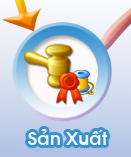
<style>
.page{position:relative;width:131px;height:157px}
.page>*{position:absolute;margin:0}
.t1{font:18px "VNI-Avo-Bold";color:#ecf8ee}
</style>
<div class="page">
<p class="t1" style="left:28px;top:129px;width:80px;height:16px">Saûn Xuaát</p>
</div>
